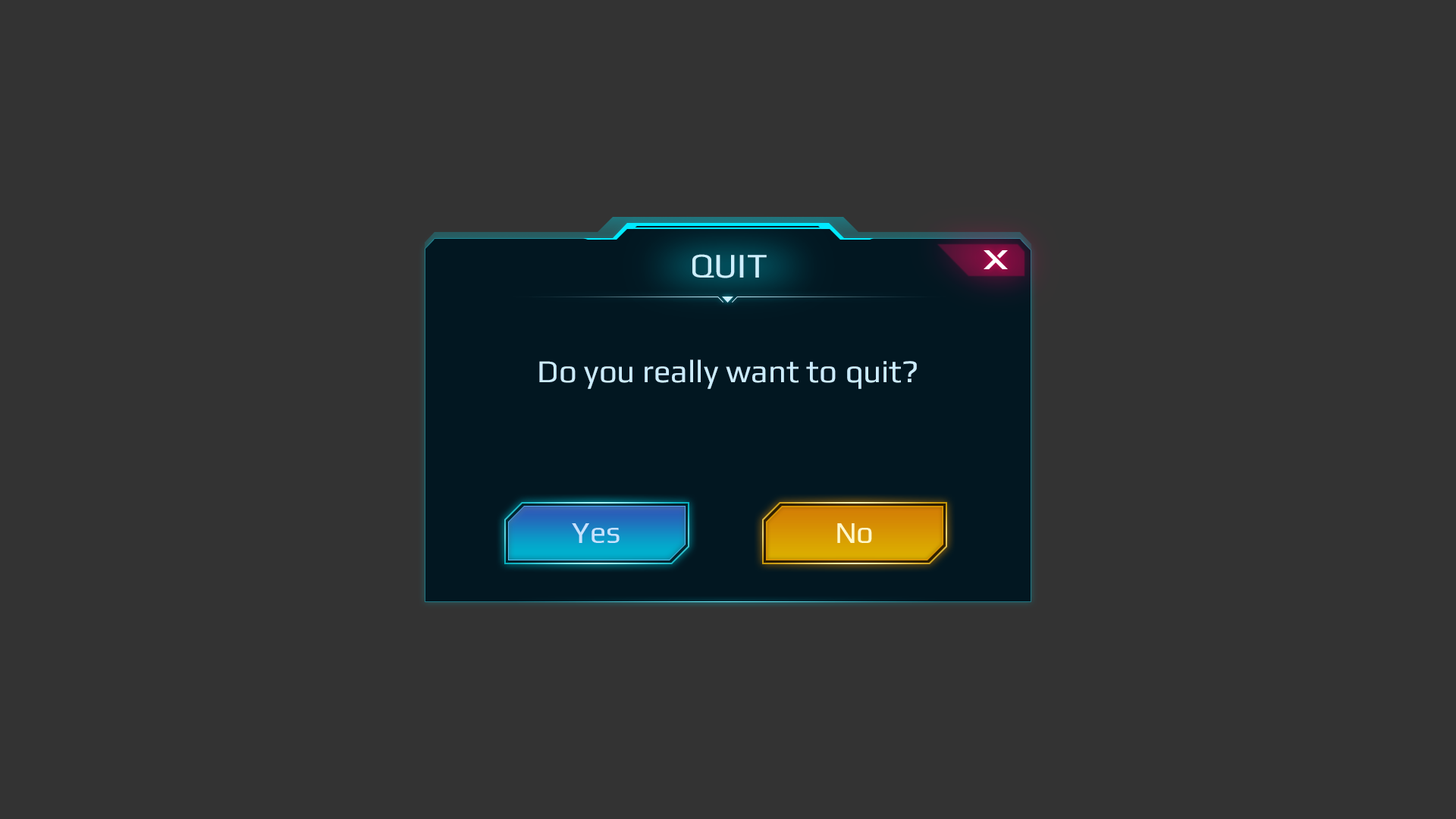
<style>
.page{position:relative;width:1456px;height:819px;background:#333333}
.page>*{position:absolute;margin:0}
.t1{font:34.9px "Play-Regular";color:#cceffe}
.t2{font:31.8px "Play-Regular";color:#ccecfe}
.t3{font:30.3px "Play-Regular";color:#c6e2ff}
.t4{font:30.3px "Play-Regular";color:#fff9c9}
</style>
<div class="page">
<p class="t1" style="left:692px;top:254px;width:75px;height:24px">QUIT</p>
<p class="t2" style="left:539px;top:359px;width:378px;height:30px">Do you really want to quit?</p>
<p class="t3" style="left:572px;top:523px;width:48px;height:20px">Yes</p>
<p class="t4" style="left:837px;top:523px;width:35px;height:20px">No</p>
</div>
